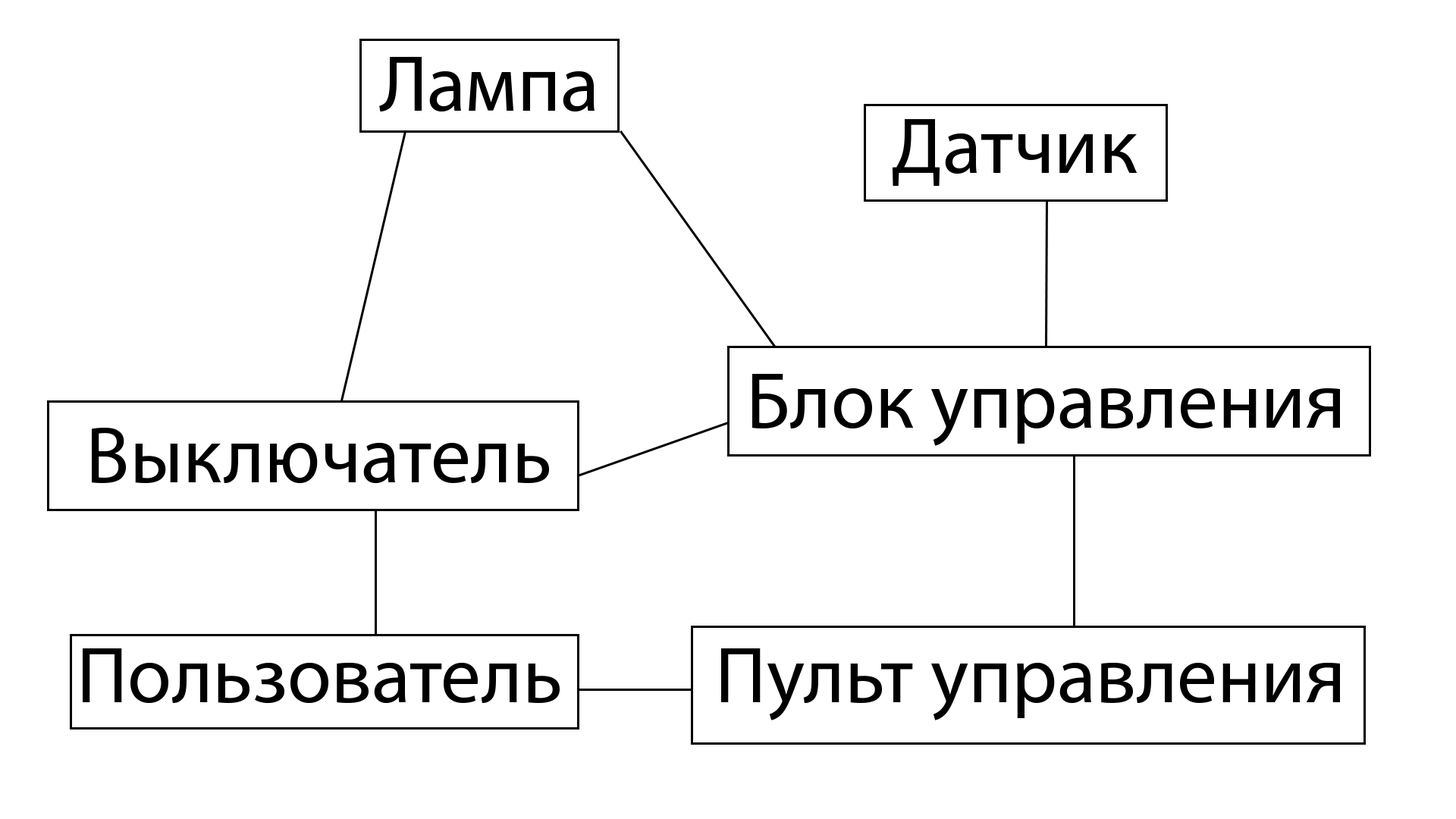
<style>
.page{position:relative;width:1456px;height:819px;background:#ffffff}
.page>*{position:absolute;margin:0}
.t1{font:80.3px "MyriadPro-Regular";color:#000000}
</style>
<div class="page">
<p class="t1" style="left:379px;top:57px;width:216px;height:55px">Лампа</p>
<p class="t1" style="left:892px;top:119px;width:245px;height:68px">Датчик</p>
<p class="t1" style="left:752px;top:374px;width:588px;height:72px">Блок управления</p>
<p class="t1" style="left:92px;top:428px;width:457px;height:56px">Выключатель</p>
<p class="t1" style="left:83px;top:648px;width:477px;height:56px">Пользователь</p>
<p class="t1" style="left:721px;top:648px;width:619px;height:72px">Пульт управления</p>
</div>
